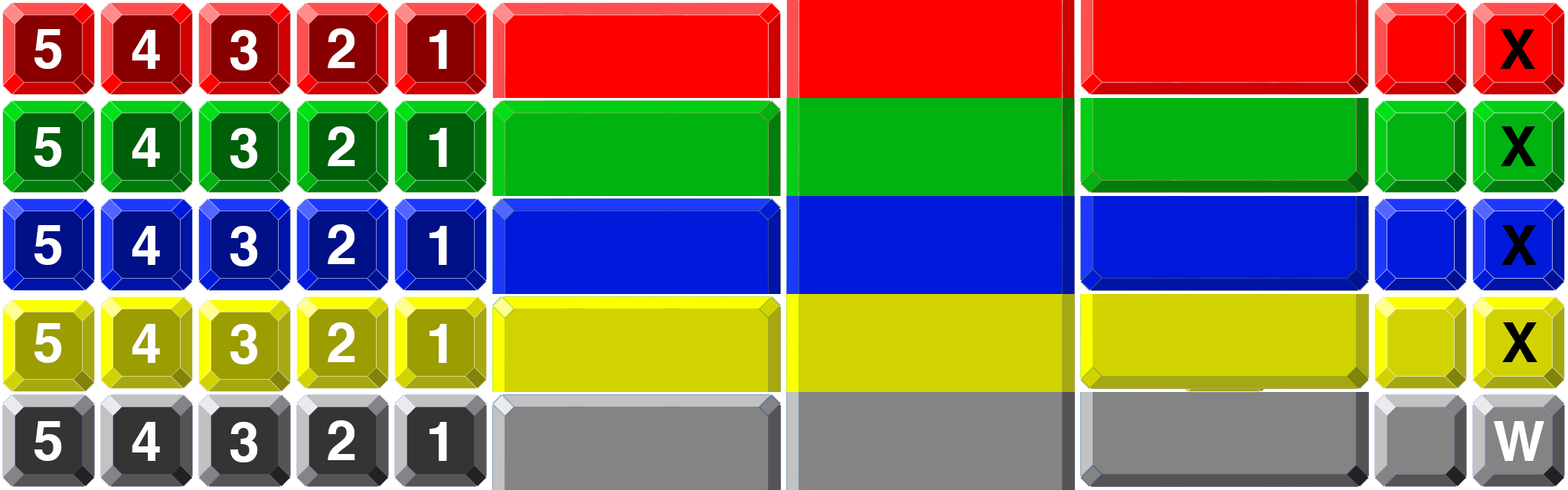
<style>
.page{position:relative;width:1568px;height:490px}
.page>*{position:absolute;margin:0}
.t1{font:55.1px "Helvetica-Bold";color:#ffffff}
.t2{font:55.1px "Helvetica-Bold";color:#000000}
</style>
<div class="page">
<p class="t1" style="left:34px;top:29px;width:28px;height:40px">5</p>
<p class="t1" style="left:132px;top:30px;width:28px;height:39px">4</p>
<p class="t1" style="left:230px;top:30px;width:28px;height:40px">3</p>
<p class="t1" style="left:328px;top:28px;width:27px;height:40px">2</p>
<p class="t1" style="left:430px;top:30px;width:17px;height:39px">1</p>
<p class="t2" style="left:1500px;top:29px;width:35px;height:40px">X</p>
<p class="t1" style="left:34px;top:127px;width:28px;height:40px">5</p>
<p class="t1" style="left:132px;top:128px;width:28px;height:39px">4</p>
<p class="t1" style="left:230px;top:128px;width:28px;height:40px">3</p>
<p class="t1" style="left:328px;top:126px;width:27px;height:40px">2</p>
<p class="t1" style="left:430px;top:128px;width:17px;height:39px">1</p>
<p class="t2" style="left:1501px;top:126px;width:35px;height:40px">X</p>
<p class="t1" style="left:34px;top:225px;width:28px;height:40px">5</p>
<p class="t1" style="left:132px;top:226px;width:28px;height:39px">4</p>
<p class="t1" style="left:230px;top:226px;width:28px;height:40px">3</p>
<p class="t1" style="left:328px;top:224px;width:27px;height:40px">2</p>
<p class="t1" style="left:430px;top:226px;width:17px;height:39px">1</p>
<p class="t2" style="left:1501px;top:225px;width:36px;height:40px">X</p>
<p class="t1" style="left:34px;top:323px;width:28px;height:40px">5</p>
<p class="t1" style="left:132px;top:324px;width:28px;height:39px">4</p>
<p class="t1" style="left:230px;top:324px;width:28px;height:40px">3</p>
<p class="t1" style="left:328px;top:322px;width:27px;height:40px">2</p>
<p class="t1" style="left:430px;top:324px;width:17px;height:39px">1</p>
<p class="t2" style="left:1502px;top:322px;width:35px;height:40px">X</p>
<p class="t1" style="left:34px;top:421px;width:28px;height:40px">5</p>
<p class="t1" style="left:132px;top:422px;width:28px;height:39px">4</p>
<p class="t1" style="left:230px;top:422px;width:28px;height:40px">3</p>
<p class="t1" style="left:328px;top:420px;width:27px;height:40px">2</p>
<p class="t1" style="left:430px;top:422px;width:17px;height:39px">1</p>
<p class="t1" style="left:1494px;top:421px;width:50px;height:40px">W</p>
</div>
